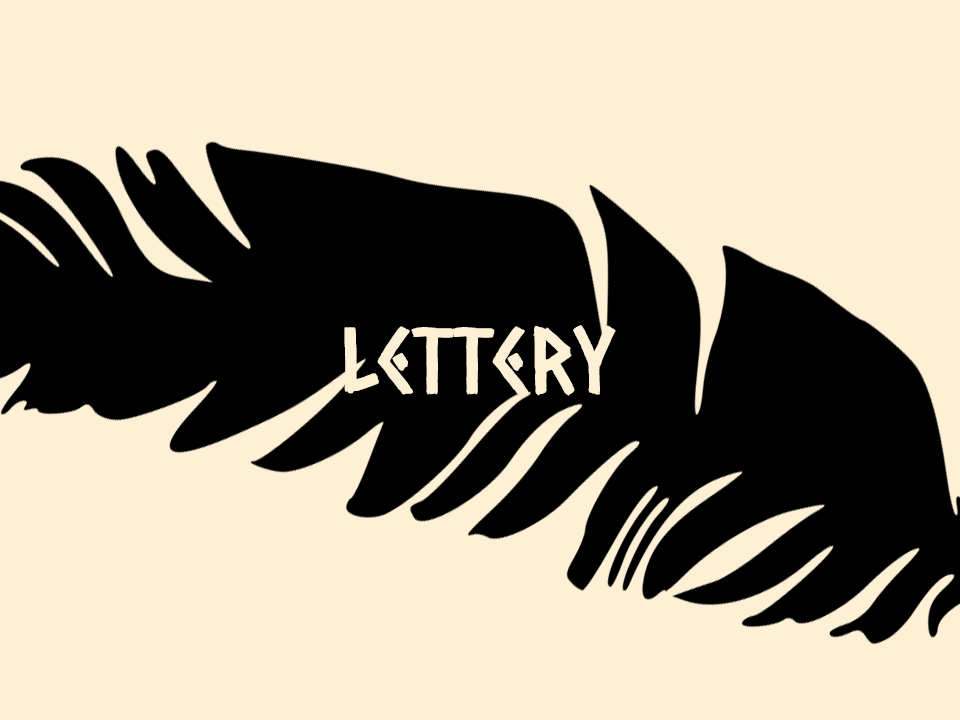
<style>
.page{position:relative;width:960px;height:720px;background:#fdf0d5}
.page>*{position:absolute;margin:0}
.t1{font:90px "CaesarDressing";color:#fdf0d5}
</style>
<div class="page">
<p class="t1" style="left:344px;top:325px;width:272px;height:71px">lettery</p>
</div>
